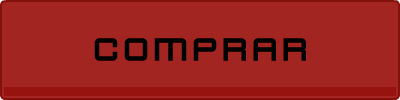
<style>
.page{position:relative;width:400px;height:100px;background:#a32521}
.page>*{position:absolute;margin:0}
.t1{font:36px "KenVector-Future";color:#000000}
</style>
<div class="page">
<p class="t1" style="left:94px;top:38px;width:212px;height:23px">comprar</p>
</div>
